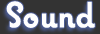
<style>
.page{position:relative;width:100px;height:34px;background:#333333}
.page>*{position:absolute;margin:0}
.t1{font:36px "CoquetteBold";color:#ffffff}
</style>
<div class="page">
<p class="t1" style="left:6px;top:1px;width:89px;height:27px">Sound</p>
</div>
